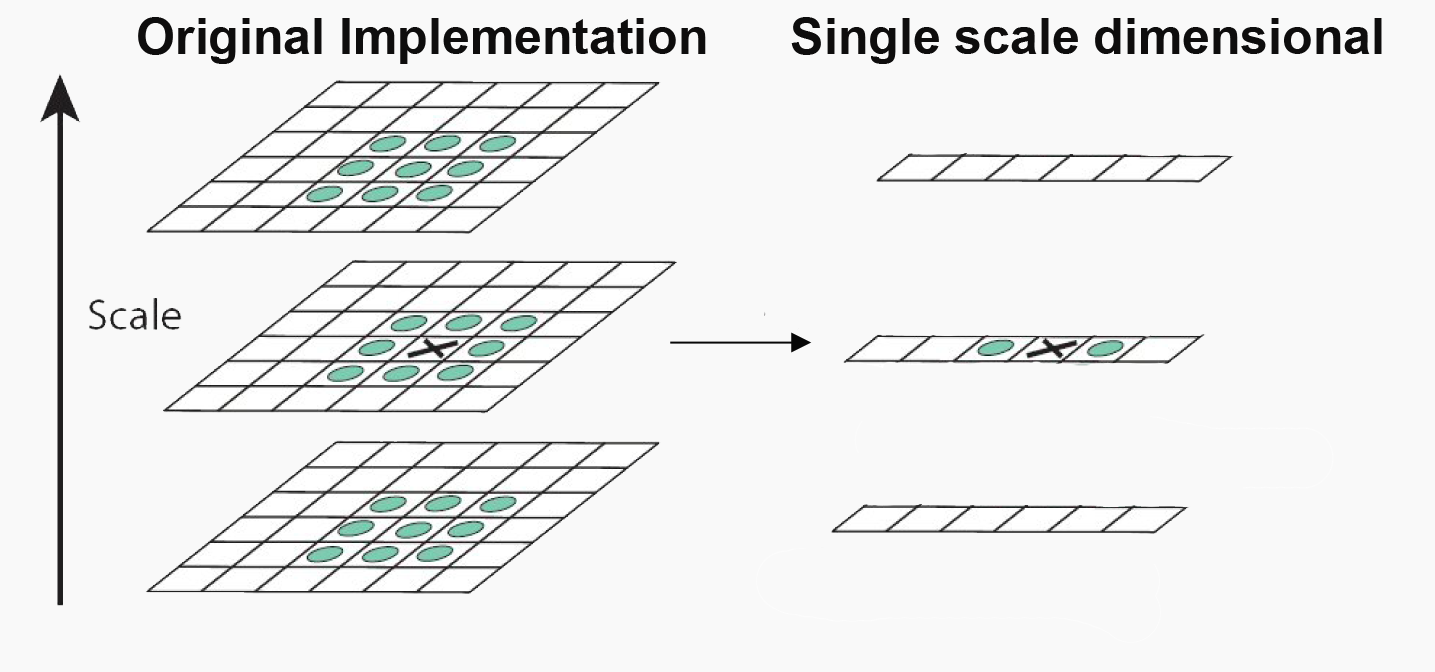
<style>
.page{position:relative;width:1435px;height:672px;background:#f9f9f9}
.page>*{position:absolute;margin:0}
.t1{font:50px "Arial-BoldMT";color:#0e0d0d}
</style>
<div class="page">
<p class="t1" style="left:138px;top:17px;width:568px;height:47px">Original Implementation</p>
<p class="t1" style="left:791px;top:17px;width:591px;height:47px">Single scale dimensional</p>
</div>
